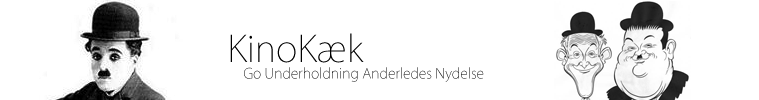
<style>
.page{position:relative;width:759px;height:100px;background:#ffffff}
.page>*{position:absolute;margin:0}
.t1{font:36px "KozGoPr6N-ExtraLight";color:#000000}
.t2{font:14px "KozGoPr6N-ExtraLight"}
</style>
<div class="page">
<p class="t1" style="left:230px;top:33px;width:134px;height:30px">KinoKæk</p>
<p class="t2" style="left:244px;top:67px;width:240px;height:15px">Go Underholdning Anderledes Nydelse</p>
</div>
